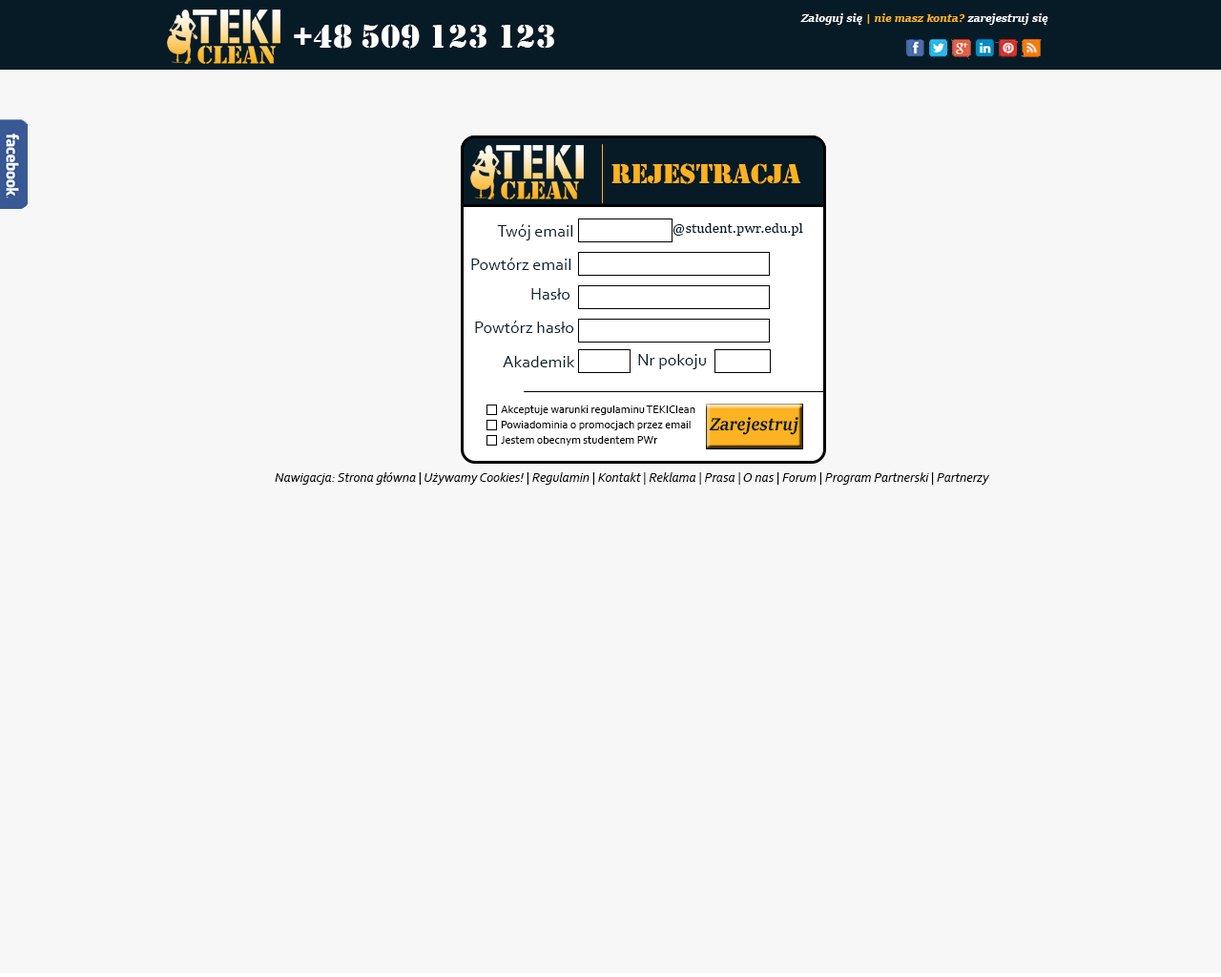
<style>
.page{position:relative;width:1221px;height:977px;background:#f7f7f7}
.page>*{position:absolute;margin:0}
.t1{font:11.4px "SitkaText-BoldItalic";color:#fcb324}
.t2{font:11.4px "SitkaText-BoldItalic";color:#ffffff}
.t3{font:34.3px "Stencil";color:#ffffff}
.t4{font:28.6px "Stencil";color:#fcb221}
.t5{font:17.2px "Corbel";color:#071b26}
.t6{font:13.4px "SitkaText";color:#071b26}
.t7{font:11.4px "Corbel";color:#000000}
.t8{font:19.1px "SitkaText-BoldItalic";color:#071b26;scale:0.85 1}
.t9{font:13.4px "Corbel-Italic";color:#010101}
</style>
<div class="page">
<p class="t1" style="left:800px;top:13px;width:248px;height:12px"><span class="t2">Zaloguj się </span>| nie masz konta? <span class="t2">zarejestruj się</span></p>
<p class="t3" style="left:294px;top:24px;width:260px;height:25px">+48 509 123 123</p>
<p class="t4" style="left:611px;top:163px;width:190px;height:21px">rejestracja</p>
<p class="t5" style="left:497px;top:224px;width:76px;height:16px">Twój email</p>
<p class="t6" style="left:672px;top:223px;width:131px;height:13px">@student.pwr.edu.pl</p>
<p class="t5" style="left:471px;top:258px;width:100px;height:12px">Powtórz email</p>
<p class="t5" style="left:531px;top:288px;width:39px;height:11px">Hasło</p>
<p class="t5" style="left:475px;top:320px;width:99px;height:13px">Powtórz hasło</p>
<p class="t5" style="left:638px;top:354px;width:68px;height:15px">Nr pokoju</p>
<p class="t5" style="left:503px;top:356px;width:72px;height:11px">Akademik</p>
<p class="t7" style="left:501px;top:405px;width:194px;height:10px">Akceptuje warunki regulaminu TEKIClean</p>
<p class="t7" style="left:501px;top:421px;width:190px;height:9px">Powiadominia o promocjach przez email</p>
<p class="t8" style="left:709px;top:417px;width:89px;height:18px">Zarejestruj</p>
<p class="t7" style="left:501px;top:436px;width:157px;height:9px">Jestem obecnym studentem PWr</p>
<p class="t9" style="left:275px;top:472px;width:715px;height:13px">Nawigacja: Strona główna | Używamy Cookies! | Regulamin | Kontakt | Reklama | Prasa | O nas | Forum | Program Partnerski | Partnerzy</p>
</div>
